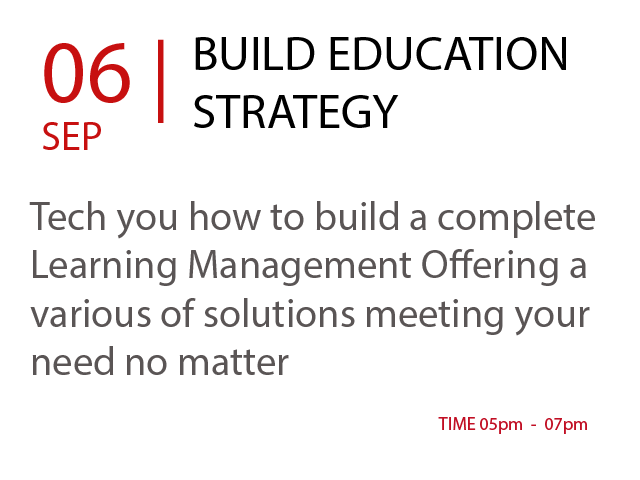
<style>
.page{position:relative;width:640px;height:480px;background:#ffffff}
.page>*{position:absolute;margin:0}
.t1{font:40.3px "MyriadPro-Regular";color:#c71010}
.t2{font:88.9px "MyriadPro-Regular";color:#c71010}
.t3{font:83.3px "MyriadPro-Regular";color:#c71010}
.t4{font:48.6px "MyriadPro-Regular";color:#000000}
.t5{font:40.3px "MyriadPro-Regular";color:#5a5555}
.t6{font:18.1px "MyriadPro-Regular";color:#c10f24}
</style>
<div class="page">
<p class="t1" style="left:43px;top:39px;width:121px;height:111px"><span class="t2">06 </span><span class="t3">|<br></span>SEP</p>
<p class="t4" style="left:194px;top:37px;width:372px;height:91px">BUILD EDUCATION<br>STRATEGY</p>
<p class="t5" style="left:29px;top:201px;width:566px;height:174px">Tech you how to build a complete <br>Learning Management Offering a <br>various of solutions meeting your <br>need no matter</p>
<p class="t6" style="left:438px;top:417px;width:149px;height:17px">TIME 05pm  -  07pm</p>
</div>
